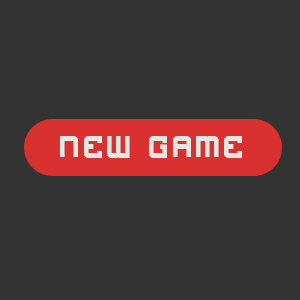
<style>
.page{position:relative;width:300px;height:300px;background:#333333}
.page>*{position:absolute;margin:0}
.t1{font:48px "4thandInches";letter-spacing:0.04em;color:#e6e6e6}
</style>
<div class="page">
<p class="t1" style="left:60px;top:136px;width:182px;height:22px">New Game</p>
</div>
